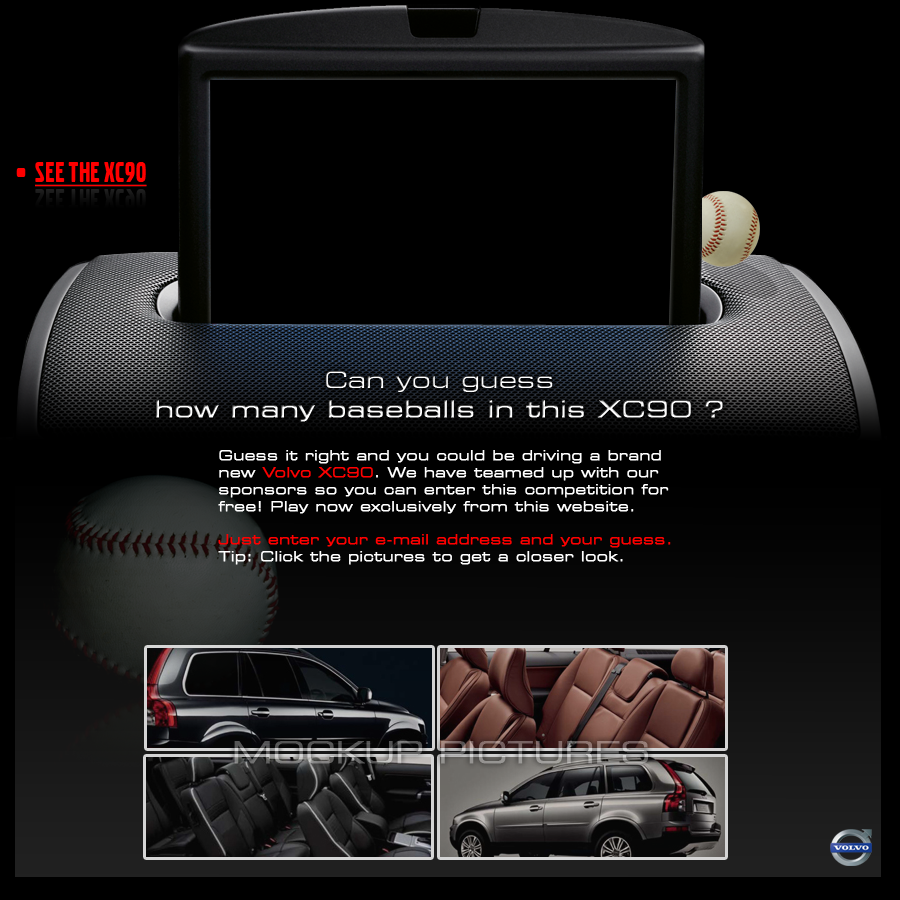
<style>
.page{position:relative;width:900px;height:900px;background:#000000}
.page>*{position:absolute;margin:0}
.t1{font:72px "VolvoBroad";color:#ff0000}
.t2{font:30px "VolvoBroad";color:#ff0000;text-decoration:underline}
.t3{font:24px "Square721BT-RomanExtended";font-weight:bold}
.t4{font:24px "Square721BT-RomanExtended"}
.t5{font:14px "Square721BT-RomanExtended";color:#ffffff;font-weight:bold}
.t6{font:14px "Square721BT-RomanExtended";color:#ff0000;font-weight:bold}
</style>
<div class="page">
<p class="t1" style="left:16px;top:168px;width:10px;height:9px">.</p>
<p class="t2" style="left:35px;top:162px;width:112px;height:25px">SEE THE XC90</p>
<p class="t3" style="left:156px;top:371px;width:567px;height:51px;text-align:center"><span class="t4">Can you guess<br></span>how many baseballs in this XC90 ?</p>
<p class="t5" style="left:218px;top:450px;width:453px;height:115px">Guess it right and you could be driving a brand<br>new <span class="t6">Volvo XC90</span>. We have teamed up with our<br>sponsors so you can enter this competition for<br>free! Play now exclusively from this website.<br><br><span class="t6">Just enter your e-mail address and your guess.<br></span>Tip: Click the pictures to get a closer look.</p>
</div>
